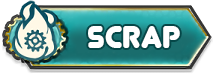
<style>
.page{position:relative;width:213px;height:75px;background:#ffffff}
.page>*{position:absolute;margin:0}
.t1{font:36px "Junegull";color:#ffffff}
</style>
<div class="page">
<p class="t1" style="left:88px;top:26px;width:92px;height:22px">SCRAP</p>
</div>
